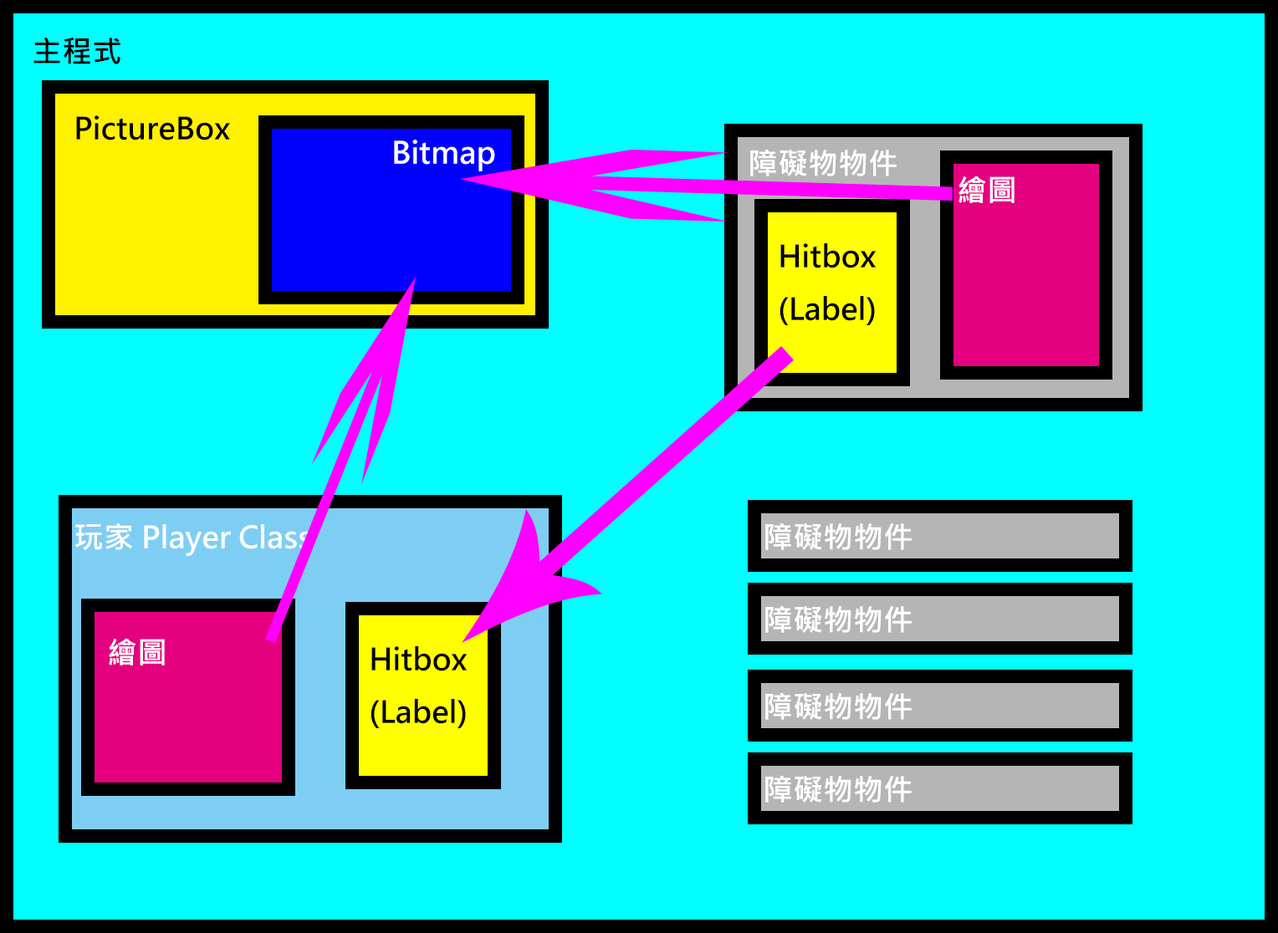
<style>
.page{position:relative;width:1278px;height:933px;background:#00ffff}
.page>*{position:absolute;margin:0}
.t1{font:30.1px "MicrosoftJhengHeiBold";color:#000000}
.t2{font:30.1px "MicrosoftJhengHeiBold";color:#ffffff}
</style>
<div class="page">
<p class="t1" style="left:33px;top:37px;width:87px;height:27px">主程式</p>
<p class="t1" style="left:76px;top:115px;width:154px;height:25px">PictureBox</p>
<p class="t2" style="left:394px;top:140px;width:101px;height:31px">Bitmap</p>
<p class="t2" style="left:750px;top:149px;width:146px;height:27px">障礙物物件</p>
<p class="t2" style="left:958px;top:176px;width:56px;height:27px">繪圖</p>
<p class="t1" style="left:779px;top:243px;width:97px;height:82px">Hitbox<br>(Label)</p>
<p class="t2" style="left:75px;top:523px;width:236px;height:33px">玩家 Player Class</p>
<p class="t2" style="left:765px;top:523px;width:146px;height:27px">障礙物物件</p>
<p class="t2" style="left:765px;top:605px;width:146px;height:28px">障礙物物件</p>
<p class="t2" style="left:109px;top:638px;width:56px;height:28px">繪圖</p>
<p class="t1" style="left:370px;top:646px;width:97px;height:82px">Hitbox<br>(Label)</p>
<p class="t2" style="left:765px;top:692px;width:146px;height:28px">障礙物物件</p>
<p class="t2" style="left:765px;top:775px;width:146px;height:28px">障礙物物件</p>
</div>
